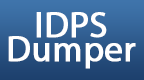
<style>
.page{position:relative;width:144px;height:80px}
.page>*{position:absolute;margin:0}
.t1{font:36px/24px "MyriadPro-Regular";color:#ffffff;font-weight:bold}
</style>
<div class="page">
<p class="t1" style="left:8px;top:12px;width:128px;height:57px;text-align:center">IDPS<br>Dumper</p>
</div>
